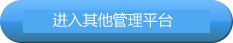
<style>
.page{position:relative;width:233px;height:43px;background:#50a7f2}
.page>*{position:absolute;margin:0}
.t1{font:15px "MicrosoftYaHei";color:#f8fafc}
</style>
<div class="page">
<p class="t1" style="left:53px;top:12px;width:120px;height:16px">进入其他管理平台</p>
</div>
